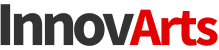
<style>
.page{position:relative;width:219px;height:50px;background:#ffffff}
.page>*{position:absolute;margin:0}
.t1{font:62.5px "SourceSansRoman-Bold";letter-spacing:-0.075em;color:#333333}
.t2{font:54.2px "SourceSansRoman-Bold";letter-spacing:-0.05em;color:#e10302}
</style>
<div class="page">
<p class="t1" style="left:0px;top:4px;width:218px;height:42px">Innov<span class="t2">Arts</span></p>
</div>
